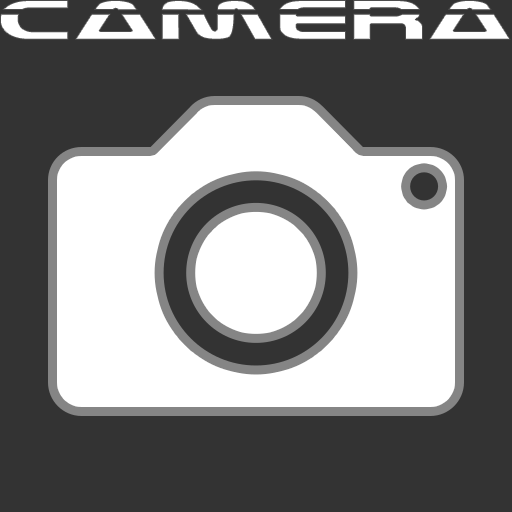
<style>
.page{position:relative;width:512px;height:512px;background:#333333}
.page>*{position:absolute;margin:0}
.t1{font:60px "Laserian";color:#ffffff}
</style>
<div class="page">
<p class="t1" style="left:0px;top:0px;width:511px;height:40px">Camera</p>
</div>
